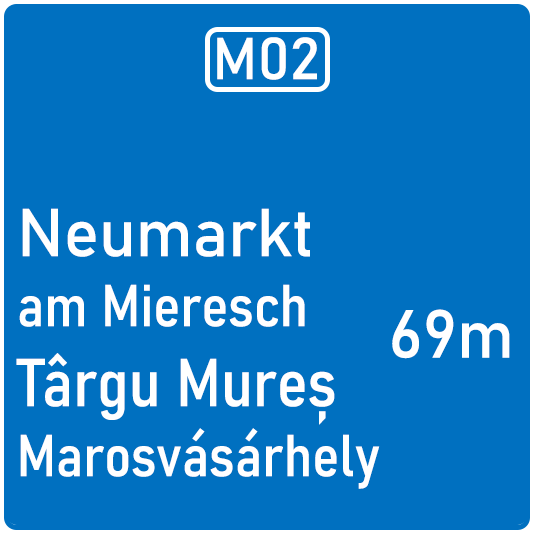
<style>
.page{position:relative;width:533px;height:533px;background:#0070c0}
.page>*{position:absolute;margin:0}
.t1{font:58.3px "Bahnschrift";color:#ffffff}
.t2{font:58.3px "Bahnschrift-SemiCondensed";color:#ffffff}
.t3{font:66.7px "Bahnschrift";color:#ffffff}
.t4{font:66.7px "Bahnschrift-SemiCondensed";color:#ffffff}
</style>
<div class="page">
<p class="t1" style="left:217px;top:37px;width:100px;height:43px">M02</p>
<p class="t2" style="left:16px;top:208px;width:364px;height:281px"><span class="t3">Neumarkt<br></span>am Mieresch<span class="t4"><br>Târgu Mureș<br></span>Marosvásárhely</p>
<p class="t3" style="left:392px;top:309px;width:118px;height:50px">69m</p>
</div>
